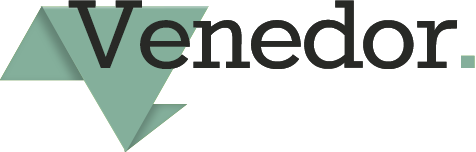
<style>
.page{position:relative;width:476px;height:152px;background:#ffffff}
.page>*{position:absolute;margin:0}
.t1{font:119.7px "Rokkitt";letter-spacing:-0.025em;color:#282926}
.t2{font:119.7px "Rokkitt";letter-spacing:-0.025em;color:#84af9b}
</style>
<div class="page">
<p class="t1" style="left:68px;top:0px;width:407px;height:69px">Venedor.</p>
<p class="t1" style="left:68px;top:0px;width:407px;height:69px">Venedor<span class="t2">.</span></p>
</div>
